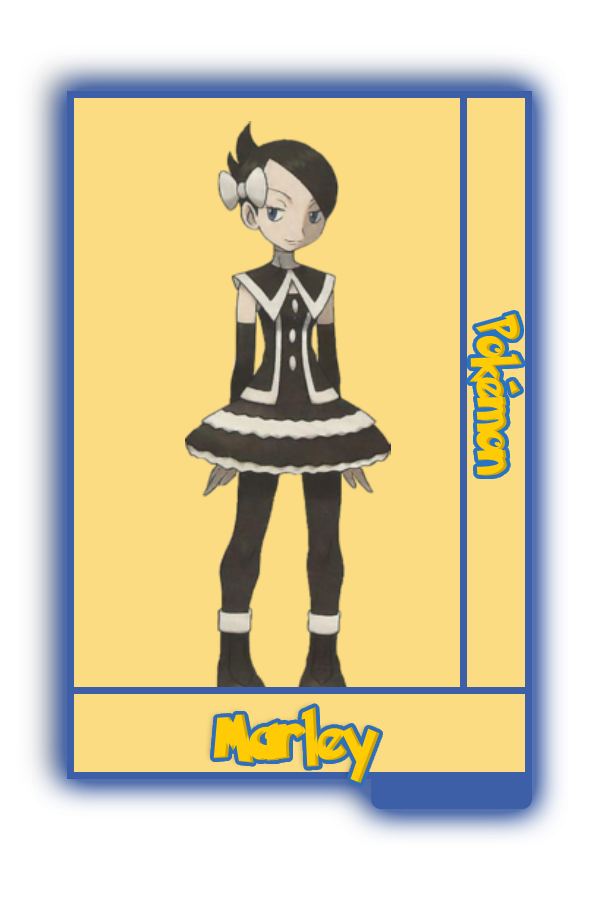
<style>
.page{position:relative;width:600px;height:900px;background:#fbdc83}
.page>*{position:absolute;margin:0}
.t1{font:48.8px "PokemonSolidNormal";color:#ffcb05;scale:0.8 1}
.t2{font:56.6px "PokemonSolidNormal";color:#ffcb05;scale:0.92 1}
</style>
<div class="page">
<p class="t1" style="left:469px;top:313px;width:54px;height:163px;rotate:90deg">Pokémon</p>
<p class="t2" style="left:213px;top:706px;width:167px;height:77px">Marley</p>
</div>
